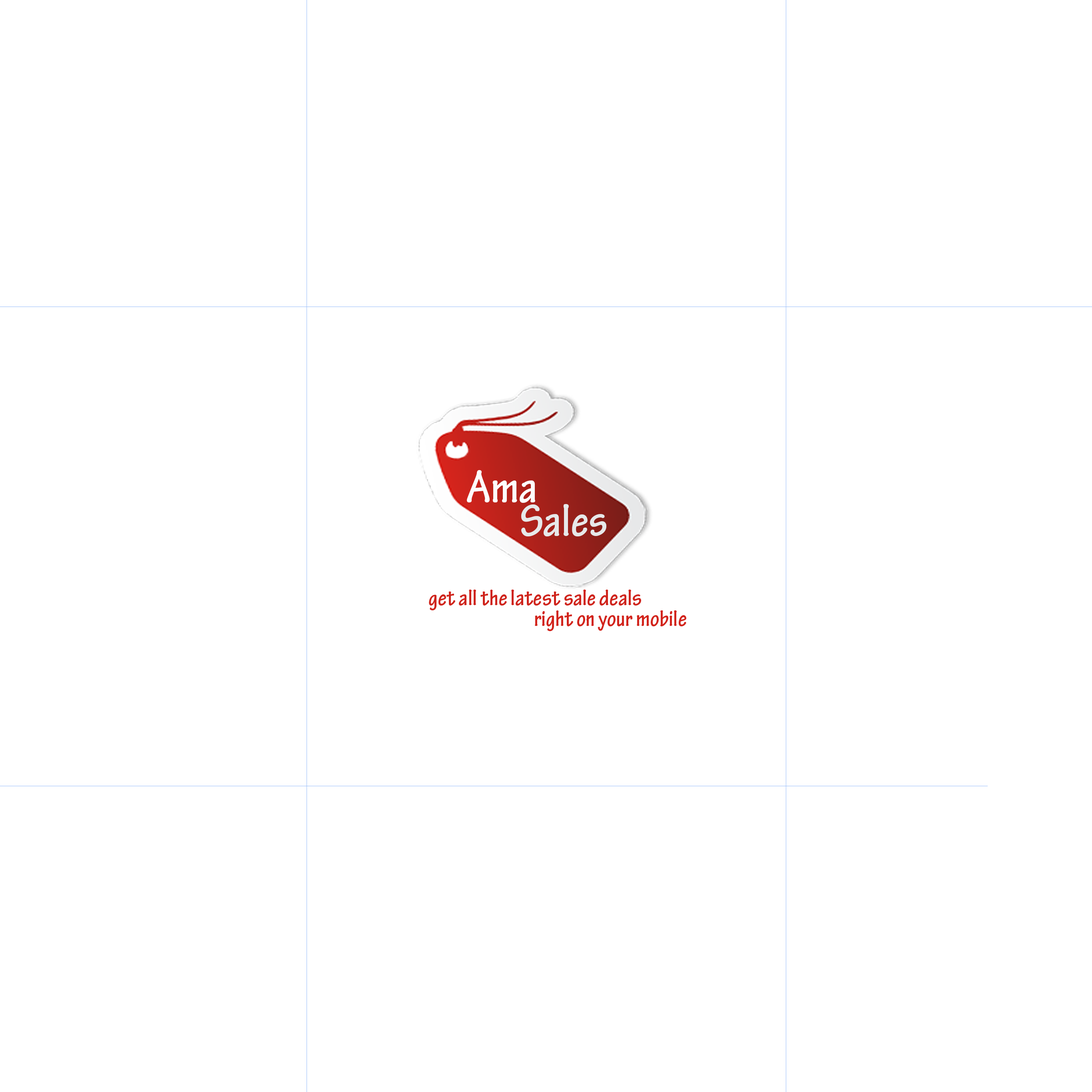
<style>
.page{position:relative;width:1092px;height:1092px;background:#ffffff}
.page>*{position:absolute;margin:0}
.t1{font:48px "TektonPro-BoldCond";color:#fdfdfd}
.t2{font:48px "TektonPro-BoldCond";color:#e7e8e9}
.t3{font:24px "TektonPro-BoldCond";color:#cf241c}
.t4{font:24px "TektonPro-BoldCond";color:#d2241c}
</style>
<div class="page">
<p class="t1" style="left:467px;top:470px;width:68px;height:33px">Ama</p>
<p class="t2" style="left:521px;top:504px;width:85px;height:32px">Sales</p>
<p class="t3" style="left:429px;top:590px;width:212px;height:20px">get all the latest sale deals</p>
<p class="t4" style="left:535px;top:610px;width:151px;height:21px">right on your mobile</p>
</div>
